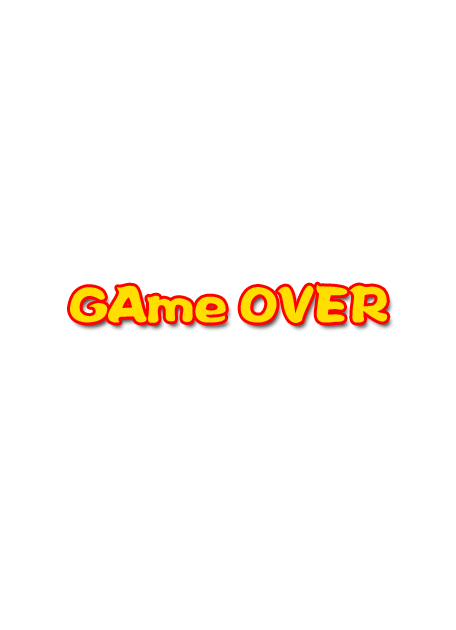
<style>
.page{position:relative;width:456px;height:630px;background:#ffffff}
.page>*{position:absolute;margin:0}
.t1{font:48px "FZPTYJW--GB1-0";color:#ffde00}
</style>
<div class="page">
<p class="t1" style="left:70px;top:284px;width:318px;height:39px">GAme OVER</p>
</div>
